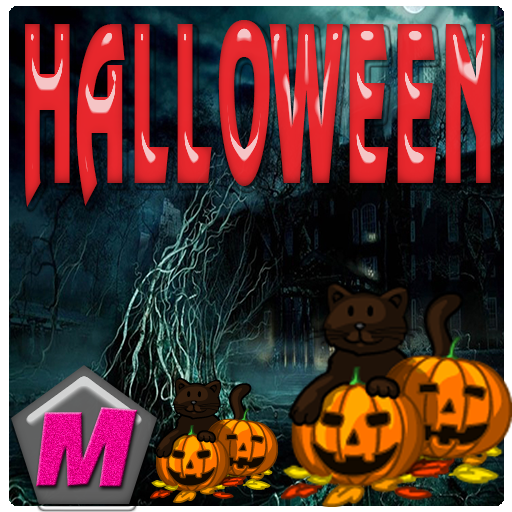
<style>
.page{position:relative;width:512px;height:512px}
.page>*{position:absolute;margin:0}
.t1{font:194.4px "VNI-Revue-Bold";color:#e5272c;scale:0.35 1}
.t2{font:105.5px "VNI-Jamai";scale:1.23 1}
</style>
<div class="page">
<p class="t1" style="left:25px;top:20px;width:466px;height:187px">HALLOWEEN</p>
<p class="t2" style="left:36px;top:407px;width:102px;height:80px">M</p>
</div>
